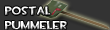
<style>
.page{position:relative;width:110px;height:30px;background:#333333}
.page>*{position:absolute;margin:0}
.t1{font:12px "TF2Build"}
</style>
<div class="page">
<p class="t1" style="left:5px;top:6px;width:62px;height:24px">POSTAL<br>Pummeler</p>
</div>
